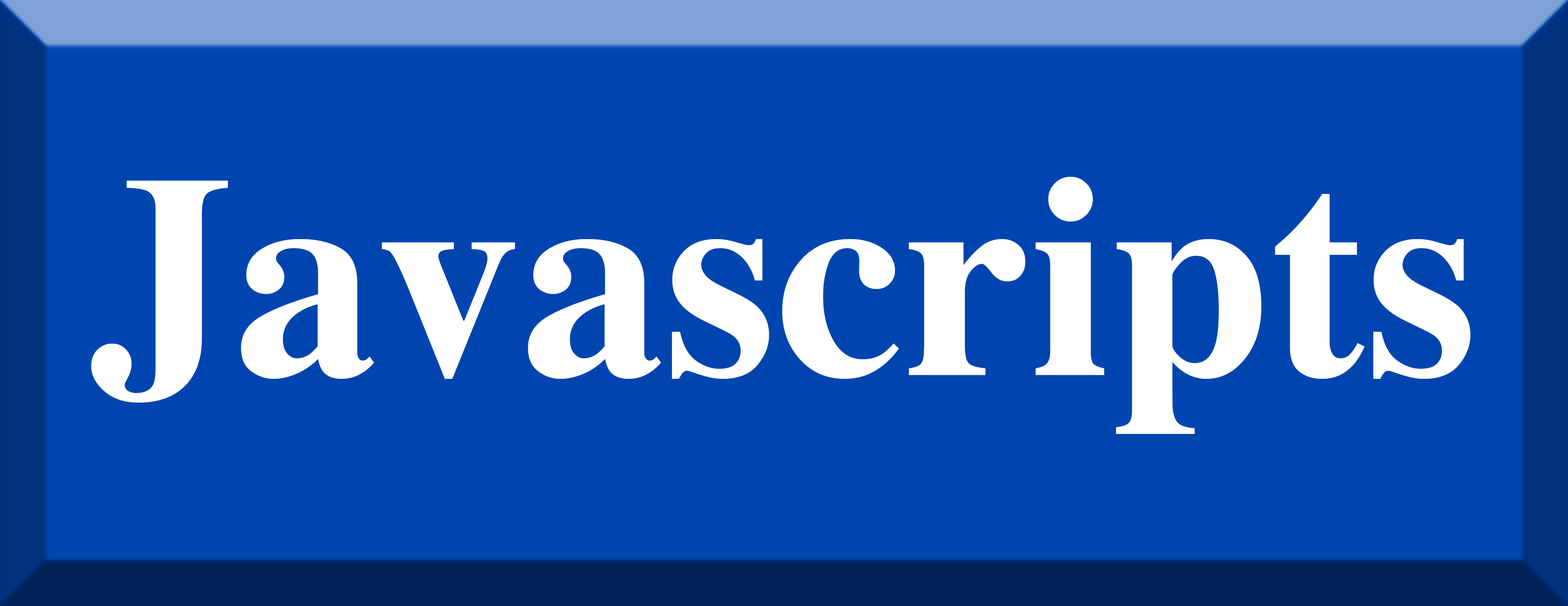
<style>
.page{position:relative;width:1568px;height:606px;background:#0045af}
.page>*{position:absolute;margin:0}
.t1{font:287.1px "Times-Bold";color:#ffffff}
</style>
<div class="page">
<p class="t1" style="left:91px;top:177px;width:1380px;height:257px">Javascripts</p>
</div>
